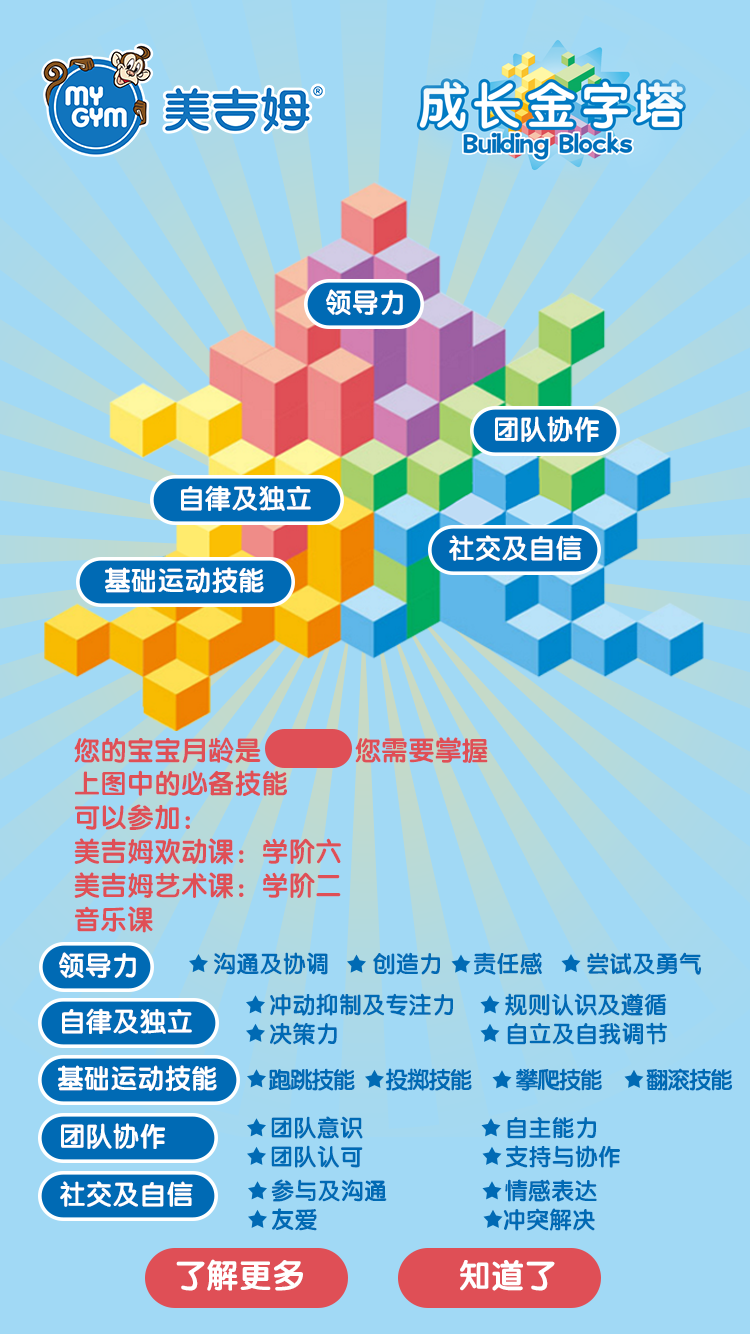
<style>
.page{position:relative;width:750px;height:1334px;background:#a1d9f5}
.page>*{position:absolute;margin:0}
.t1{font:27.2px "FZY4JW--GB1-0";color:#ffffff}
.t2{font:27.2px/39.4px "FZY4JW--GB1-0";color:#df4f56}
.t3{font:23.5px "FZY4JW--GB1-0";color:#006ab4}
.t4{font:23.5px/34px "FZY4JW--GB1-0";color:#006ab4}
.t5{font:23.5px "FZY4JW--GB1-0";letter-spacing:-0.075em;color:#006ab4}
.t6{font:33px "FZY4JW--GB1-0";color:#ffffff}
</style>
<div class="page">
<p class="t1" style="left:326px;top:289px;width:77px;height:26px">领导力</p>
<p class="t1" style="left:495px;top:416px;width:104px;height:26px">团队协作</p>
<p class="t1" style="left:181px;top:485px;width:130px;height:26px">自律及独立</p>
<p class="t1" style="left:449px;top:535px;width:133px;height:26px">社交及自信</p>
<p class="t1" style="left:105px;top:567px;width:159px;height:26px">基础运动技能</p>
<p class="t2" style="left:74px;top:737px;width:414px;height:196px">您的宝宝月龄是             您需要掌握<br>上图中的必备技能<br>可以参加：<br>美吉姆欢动课：学阶六<br>美吉姆艺术课：学阶二<br>音乐课</p>
<p class="t1" style="left:59px;top:952px;width:77px;height:26px">领导力</p>
<p class="t3" style="left:214px;top:952px;width:487px;height:23px">沟通及协调       创造力     责任感       尝试及勇气</p>
<p class="t4" style="left:270px;top:993px;width:397px;height:52px">冲动抑制及专注力        规则认识及遵循<br>决策力                           自立及自我调节</p>
<p class="t1" style="left:62px;top:1008px;width:130px;height:26px">自律及独立</p>
<p class="t1" style="left:58px;top:1065px;width:159px;height:26px">基础运动技能</p>
<p class="t5" style="left:269px;top:1068px;width:463px;height:23px">跑跳技能       投掷技能          攀爬技能          翻滚技能</p>
<p class="t4" style="left:271px;top:1116px;width:349px;height:52px">团队意识                       自主能力<br>团队认可                       支持与协作</p>
<p class="t1" style="left:61px;top:1123px;width:104px;height:26px">团队协作</p>
<p class="t1" style="left:60px;top:1181px;width:133px;height:26px">社交及自信</p>
<p class="t4" style="left:271px;top:1179px;width:326px;height:52px">参与及沟通                   情感表达<br>友爱                              冲突解决</p>
<p class="t6" style="left:176px;top:1259px;width:127px;height:32px">了解更多</p>
<p class="t6" style="left:460px;top:1260px;width:95px;height:31px">知道了</p>
</div>
